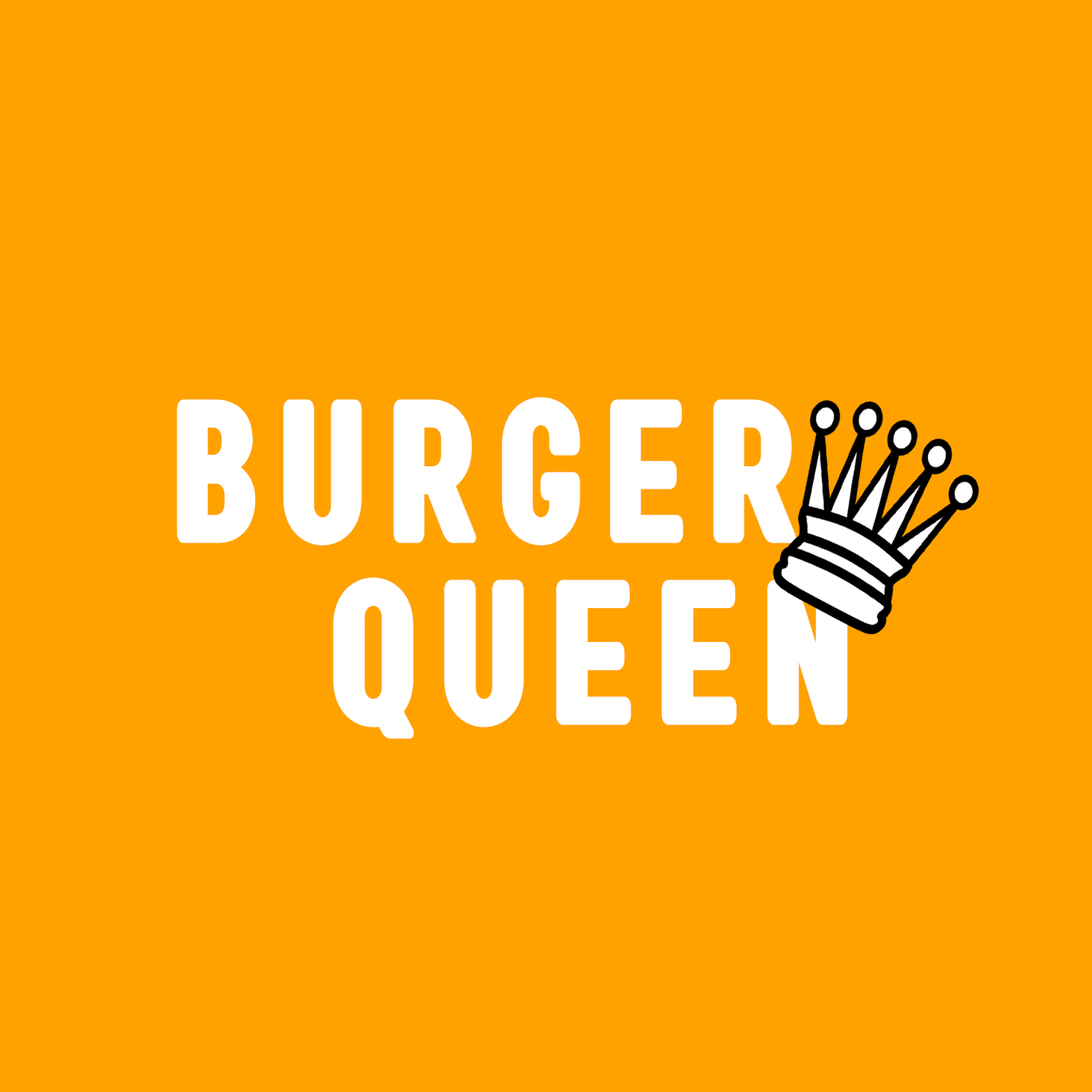
<style>
.page{position:relative;width:1092px;height:1092px;background:#ffa200}
.page>*{position:absolute;margin:0}
.t1{font:188.8px "aAkhirTahun";letter-spacing:0.15em;color:#ffffff;font-weight:bold;scale:0.66 1}
.t2{font:190.6px "aAkhirTahun";letter-spacing:0.15em;color:#ffffff;font-weight:bold;scale:0.67 1}
</style>
<div class="page">
<p class="t1" style="left:176px;top:397px;width:620px;height:149px">BURGER</p>
<p class="t2" style="left:333px;top:577px;width:515px;height:162px">QUEEN</p>
</div>
